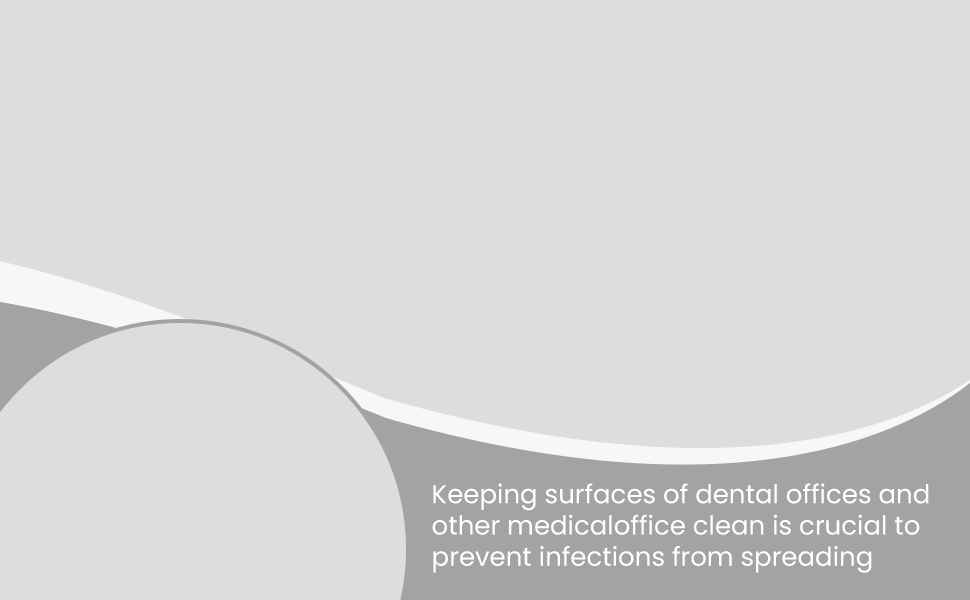
<style>
.page{position:relative;width:970px;height:600px;background:#dcdddf}
.page>*{position:absolute;margin:0}
.t1{font:26px "Poppins-Regular";color:#ffffff}
</style>
<div class="page">
<p class="t1" style="left:432px;top:483px;width:497px;height:90px">Keeping surfaces of dental offices and<br>other medicaloffice clean is crucial to<br>prevent infections from spreading</p>
</div>
